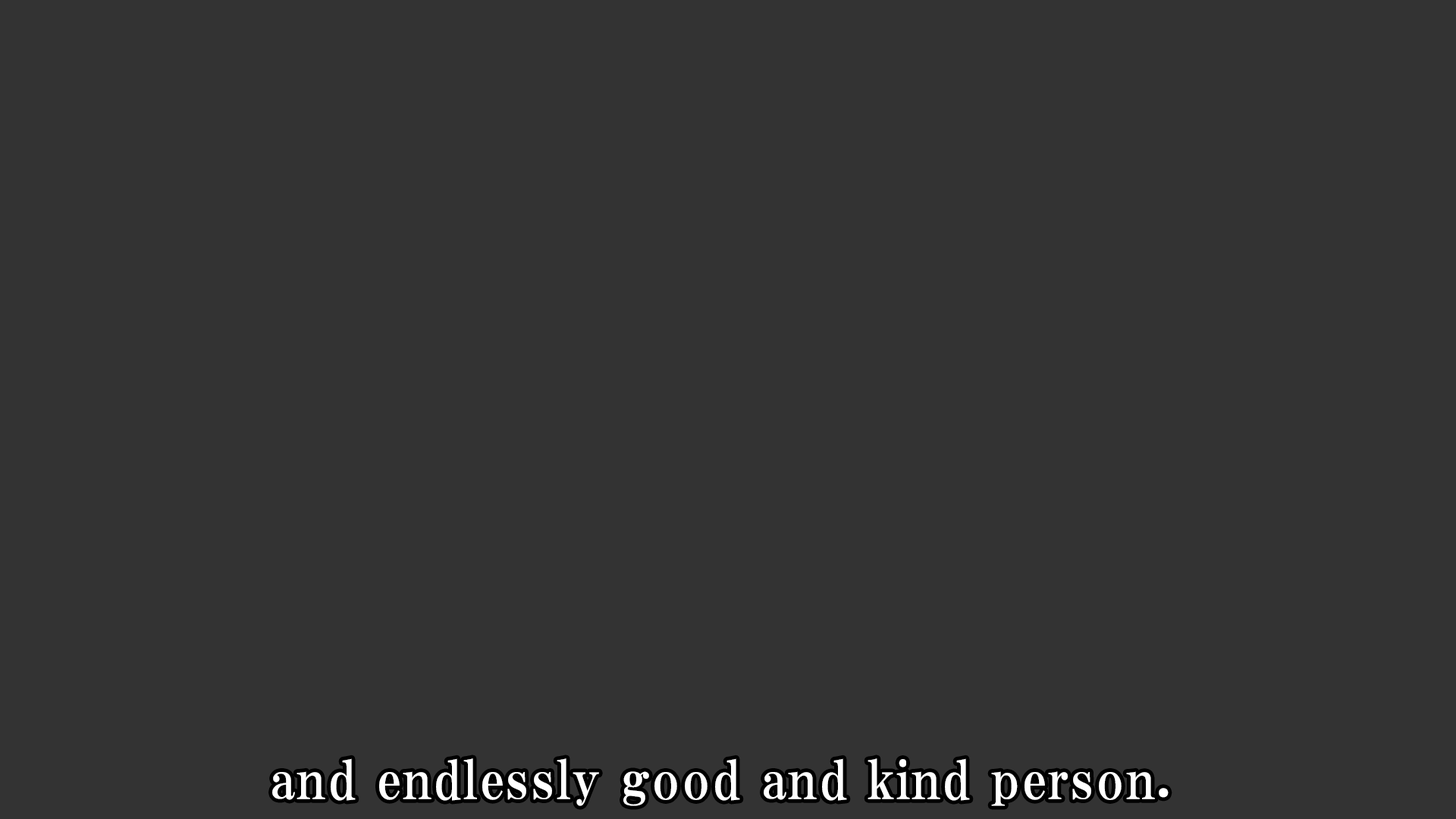
<style>
.page{position:relative;width:1456px;height:819px;background:#333333}
.page>*{position:absolute;margin:0}
.t1{font:53.1px "HGPMinchoE";letter-spacing:0.025em;color:#ffffff}
</style>
<div class="page">
<p class="t1" style="left:272px;top:758px;width:897px;height:48px">and endlessly good and kind person.</p>
</div>
